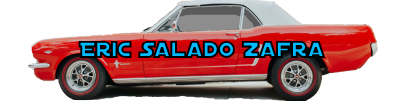
<style>
.page{position:relative;width:402px;height:101px;background:#ffffff}
.page>*{position:absolute;margin:0}
.t1{font:23.2px "DistantGalaxy"}
</style>
<div class="page">
<p class="t1" style="left:78px;top:41px;width:247px;height:17px">Eric Salado Zafra</p>
</div>
